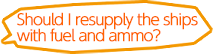
<style>
.page{position:relative;width:213px;height:54px;background:#ffffff}
.page>*{position:absolute;margin:0}
.t1{font:15px/16px "UDShinGoPro-Light";letter-spacing:-0.08em;color:#ff6200;font-weight:bold}
</style>
<div class="page">
<p class="t1" style="left:16px;top:12px;width:182px;height:30px">Should I resupply the ships<br>with fuel and ammo?</p>
</div>
